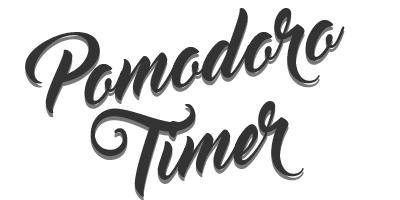
<style>
.page{position:relative;width:400px;height:200px;background:#ffffff}
.page>*{position:absolute;margin:0}
.t1{font:76.9px "MasterOfBreak";color:#333333}
</style>
<div class="page">
<p class="t1" style="left:25px;top:8px;width:320px;height:106px;rotate:-11deg">Pomodoro</p>
<p class="t1" style="left:90px;top:101px;width:214px;height:96px;rotate:-11deg">Timer</p>
</div>
